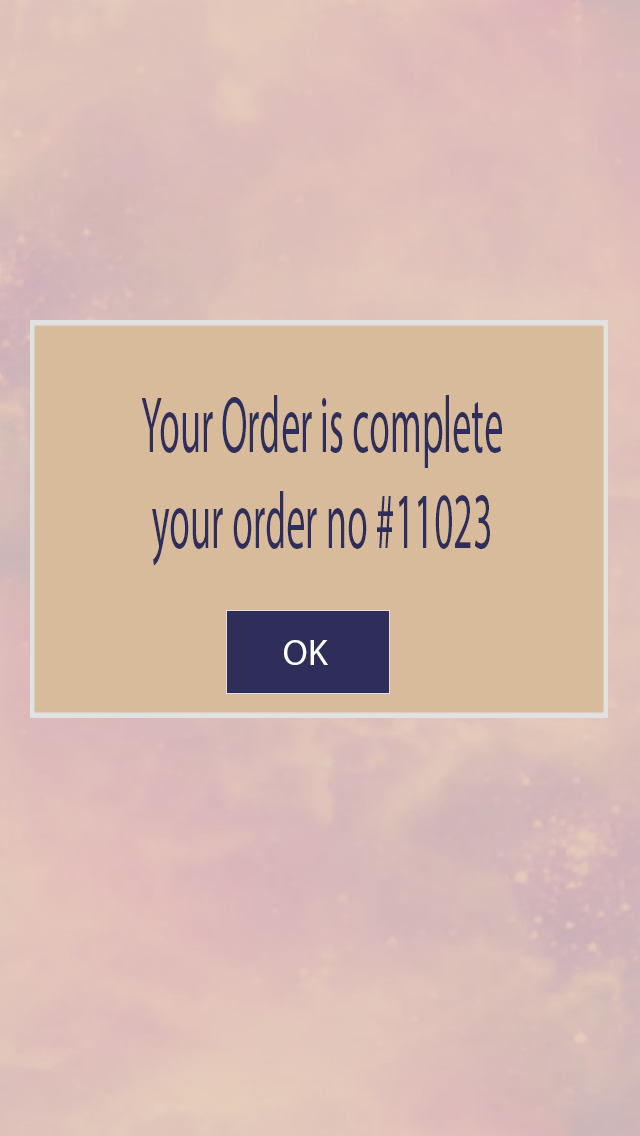
<style>
.page{position:relative;width:640px;height:1136px;background:#d8bb9b}
.page>*{position:absolute;margin:0}
.t1{font:80px "MyriadPro-Regular";color:#2f2e5a;scale:0.48 1}
.t2{font:36px "MyriadPro-Regular";color:#ffffff}
</style>
<div class="page">
<p class="t1" style="left:141px;top:395px;width:361px;height:171px;text-align:center">Your Order is complete<br>11023# your order no</p>
<p class="t2" style="left:284px;top:640px;width:44px;height:25px">OK</p>
</div>
